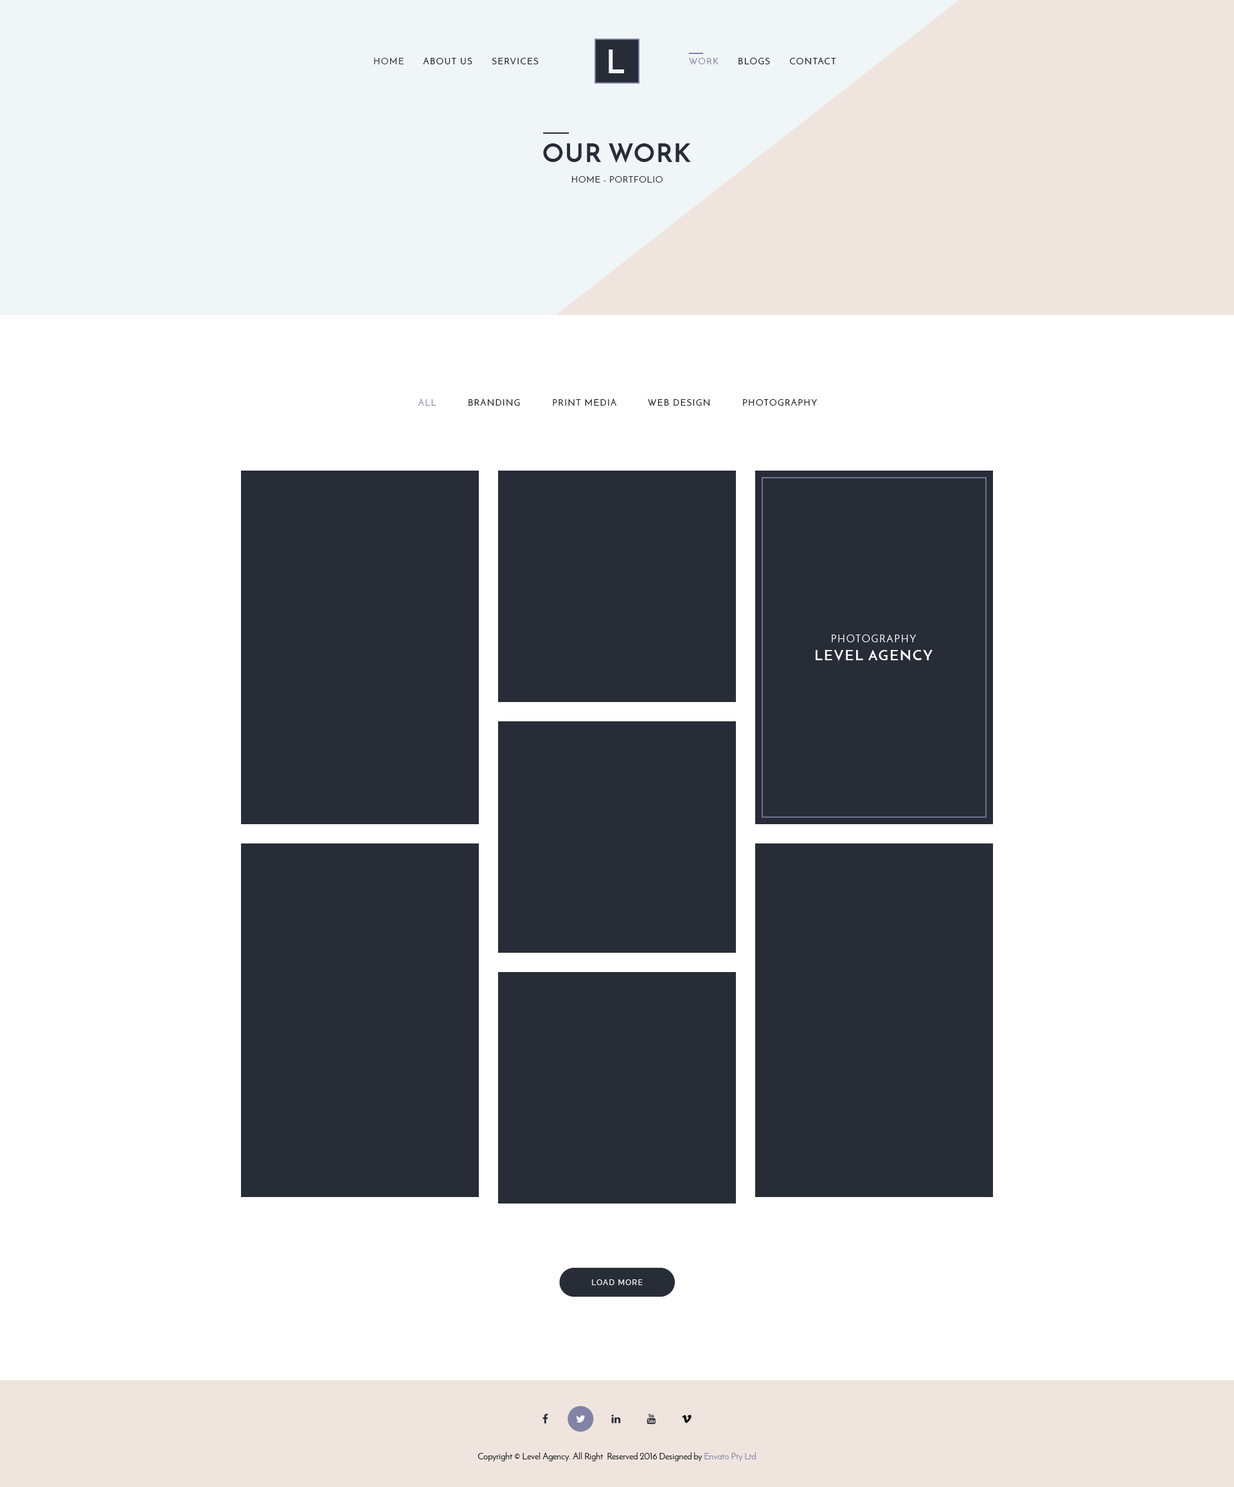
<style>
.page{position:relative;width:1234px;height:1487px;background:#ffffff}
.page>*{position:absolute;margin:0}
.t1{font:32.1px "JosefinSans-Bold";letter-spacing:0.4em;color:#f0f5f7;text-transform:uppercase}
.t2{font:9px "JosefinSans";letter-spacing:0.1em;color:#141414;text-transform:uppercase}
.t3{font:9px "JosefinSans";letter-spacing:0.1em;color:#282c37;text-transform:uppercase}
.t4{font:9px "JosefinSans";letter-spacing:0.1em;color:#8283a7;text-transform:uppercase}
.t5{font:25.7px "JosefinSans-Bold";letter-spacing:0.05em;color:#282c37;text-transform:uppercase}
.t6{font:9px "JosefinSans";letter-spacing:0.05em;color:#282c37;text-transform:uppercase}
.t7{font:10.3px "JosefinSans";letter-spacing:0.1em;color:#ffffff;text-transform:uppercase}
.t8{font:14.1px "JosefinSans-Bold";letter-spacing:0.1em;color:#ffffff;text-transform:uppercase}
.t9{font:7.7px "Raleway-Medium";letter-spacing:0.1em;color:#ffffff;text-transform:uppercase}
.t10{font:9px "JosefinSans";color:#141414}
.t11{font:9px "JosefinSans";color:#8283a7}
</style>
<div class="page">
<p class="t1" style="left:609px;top:49px;width:15px;height:24px">L</p>
<p class="t2" style="left:374px;top:57px;width:165px;height:8px"><span class="t3">HOME      </span>ABOUT US      SERVICES</p>
<p class="t2" style="left:689px;top:57px;width:147px;height:8px"><span class="t4">WORK</span>      BLOGS      CONTACT</p>
<p class="t5" style="left:543px;top:143px;width:148px;height:20px">Our Work</p>
<p class="t6" style="left:572px;top:175px;width:91px;height:8px">Home - Portfolio</p>
<p class="t2" style="left:418px;top:399px;width:399px;height:7px"><span class="t4">All</span>          Branding          Print Media          Web Design          Photography</p>
<p class="t7" style="left:832px;top:634px;width:85px;height:8px">Photography</p>
<p class="t8" style="left:816px;top:649px;width:117px;height:12px">Level Agency</p>
<p class="t9" style="left:592px;top:1279px;width:51px;height:6px">Load more</p>
<p class="t10" style="left:478px;top:1452px;width:278px;height:9px">Copyright © Level Agency. All Right  Reserved 2016 Designed by <span class="t11">Envato Pty Ltd</span></p>
</div>
